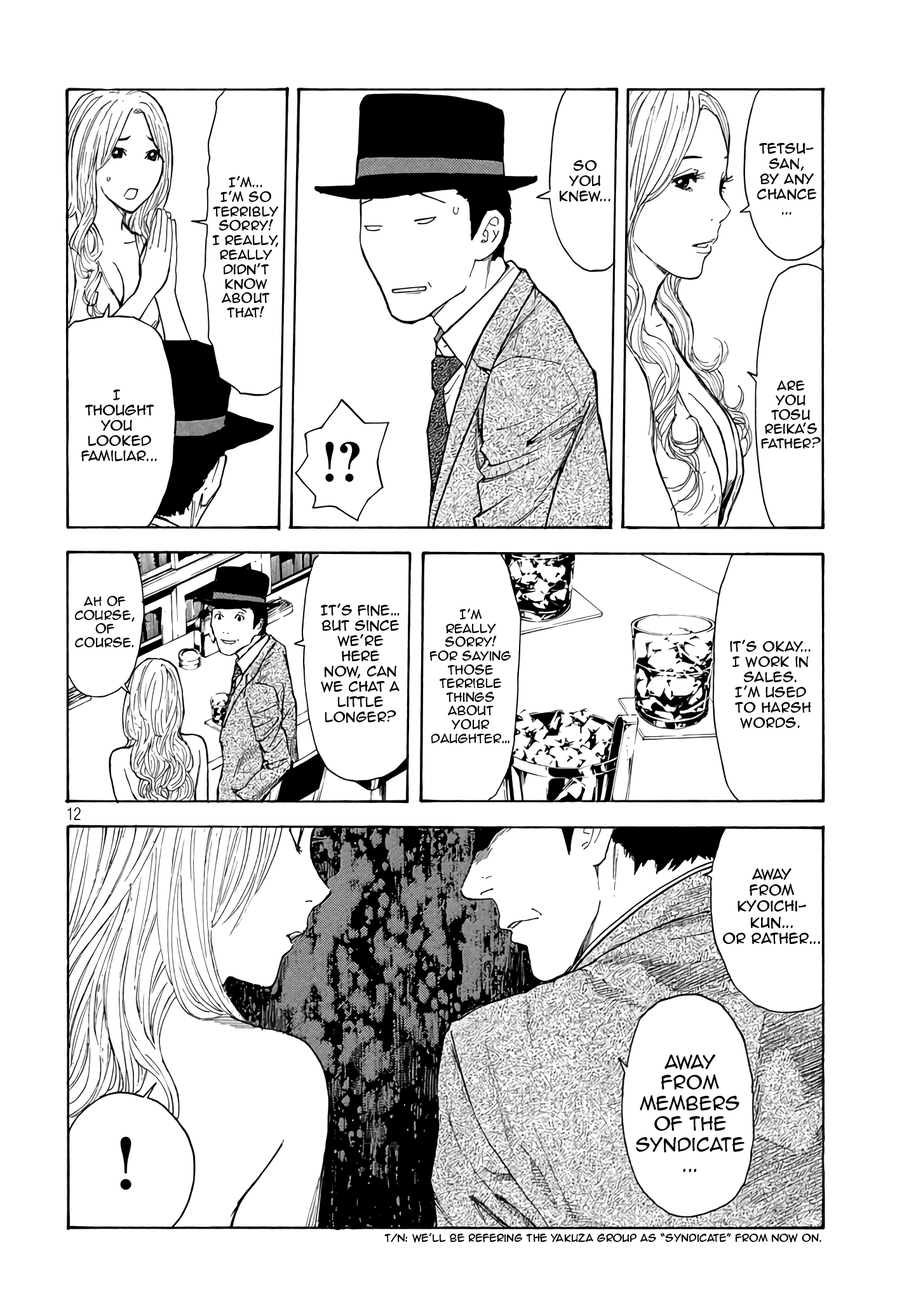
<style>
.page{position:relative;width:916px;height:1301px;background:#ffffff}
.page>*{position:absolute;margin:0}
.t1{font:12.7px "AnimeAce2.0BB";color:#000000}
.t2{font:12.1px "AnimeAce2.0BB";color:#000000}
.t3{font:11.4px "AnimeAce2.0BB";color:#000000}
.t4{font:13.3px "AnimeAce2.0BB";color:#000000}
.t5{font:17.2px "AnimeAce2.0BB";color:#000000}
.t6{font:9.5px "AnimeAce2.0BB";color:#000000}
</style>
<div class="page">
<p class="t1" style="left:757px;top:143px;width:60px;height:72px;text-align:center">Tetsu-<br>san,<br>by any<br>chance<br>...</p>
<p class="t1" style="left:559px;top:160px;width:52px;height:42px;text-align:center">So<br>you<br>knew...</p>
<p class="t2" style="left:212px;top:176px;width:67px;height:142px;text-align:center">I’m...<br>I’m so<br>terribly<br>sorry!<br>I really,<br>Really<br>didn’t<br>know<br>about<br>that!</p>
<p class="t1" style="left:81px;top:390px;width:76px;height:71px;text-align:center">I <br>thought<br>you <br>looked<br>familiar...</p>
<p class="t2" style="left:761px;top:381px;width:60px;height:68px;text-align:center">Are<br>you<br>Tosu<br>Reika’s<br>Father?</p>
<p class="t3" style="left:75px;top:596px;width:60px;height:52px;text-align:center">ah of<br>course,<br>of<br>course.</p>
<p class="t1" style="left:321px;top:604px;width:79px;height:119px;text-align:center">It’s fine…<br>but since<br>we’re here<br>now, can we chat a little longer?</p>
<p class="t3" style="left:430px;top:609px;width:81px;height:134px;text-align:center">I’m <br>really<br>sorry!<br>for saying<br>those<br>terrible<br>things<br>about your<br>daughter…</p>
<p class="t1" style="left:730px;top:640px;width:81px;height:89px;text-align:center">it’s okay...<br>I work in<br>sales.<br>I’m used<br> to harsh<br>words.</p>
<p class="t4" style="left:723px;top:869px;width:97px;height:75px;text-align:center">away<br>from<br>Kyoichi-<br>kun...<br>or rather...</p>
<p class="t5" style="left:636px;top:1055px;width:109px;height:117px;text-align:center">Away<br>from<br>members<br>of the<br>syndicate<br>...</p>
<p class="t6" style="left:384px;top:1233px;width:438px;height:10px">T/N: We’ll be refering the yakuza group as “syndicate” from now on.</p>
</div>
